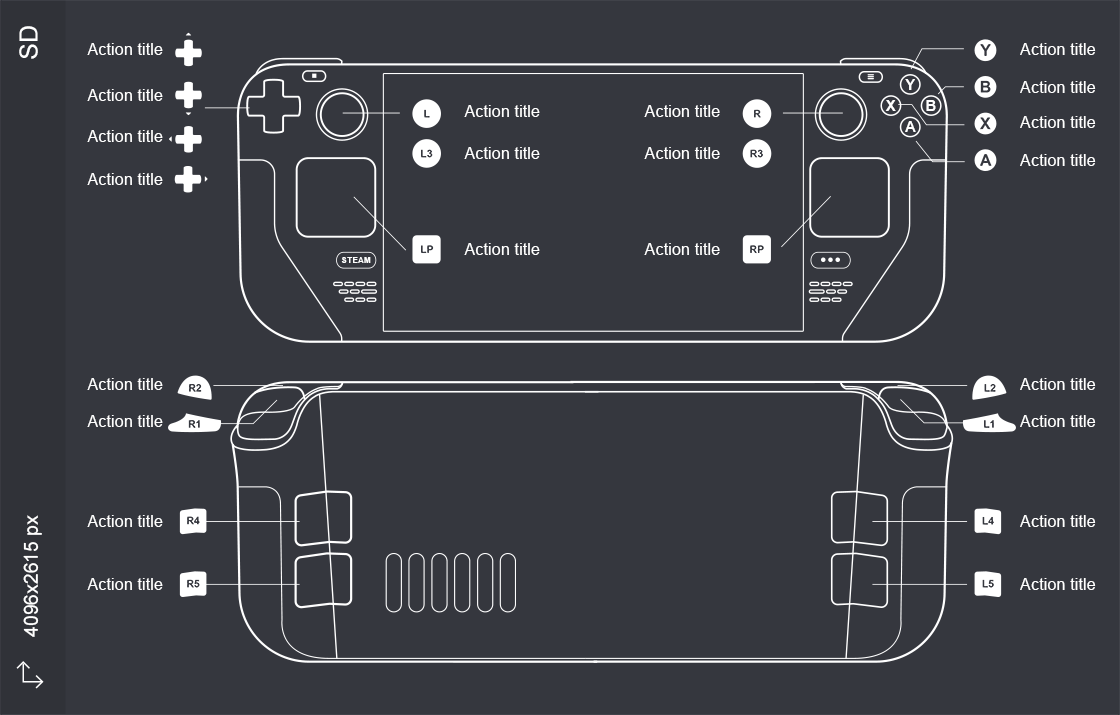
<style>
.page{position:relative;width:1120px;height:715px;background:#35373e}
.page>*{position:absolute;margin:0}
.t1{font:25px "ArialMT";color:#ffffff}
.t2{font:16.4px "ArialMT";color:#ffffff}
.t3{font:15.3px "Arial-BoldMT";color:#ffffff}
.t4{font:7.5px "Arial-BoldMT";letter-spacing:0.08em;color:#ffffff}
.t5{font:19.6px "ArialMT";color:#ffffff}
</style>
<div class="page">
<p class="t1" style="left:19px;top:26px;width:19px;height:33px;rotate:-90deg">SD</p>
<p class="t2" style="left:87px;top:43px;width:76px;height:12px">Action title</p>
<p class="t2" style="left:1020px;top:43px;width:76px;height:12px">Action title</p>
<p class="t2" style="left:87px;top:89px;width:76px;height:12px">Action title</p>
<p class="t3" style="left:905px;top:79px;width:10px;height:11px">Y</p>
<p class="t2" style="left:1020px;top:81px;width:76px;height:12px">Action title</p>
<p class="t3" style="left:885px;top:100px;width:11px;height:11px">X</p>
<p class="t3" style="left:926px;top:100px;width:10px;height:11px">B</p>
<p class="t2" style="left:464px;top:105px;width:76px;height:12px">Action title</p>
<p class="t2" style="left:644px;top:105px;width:76px;height:12px">Action title</p>
<p class="t3" style="left:905px;top:121px;width:11px;height:11px">A</p>
<p class="t2" style="left:1020px;top:116px;width:76px;height:12px">Action title</p>
<p class="t2" style="left:87px;top:130px;width:76px;height:12px">Action title</p>
<p class="t2" style="left:464px;top:147px;width:76px;height:12px">Action title</p>
<p class="t2" style="left:644px;top:147px;width:76px;height:12px">Action title</p>
<p class="t2" style="left:1020px;top:154px;width:76px;height:12px">Action title</p>
<p class="t2" style="left:87px;top:173px;width:76px;height:12px">Action title</p>
<p class="t2" style="left:464px;top:243px;width:76px;height:12px">Action title</p>
<p class="t2" style="left:644px;top:243px;width:76px;height:12px">Action title</p>
<p class="t4" style="left:341px;top:257px;width:30px;height:6px">STEAM</p>
<p class="t2" style="left:87px;top:378px;width:76px;height:12px">Action title</p>
<p class="t2" style="left:1020px;top:378px;width:76px;height:12px">Action title</p>
<p class="t2" style="left:87px;top:415px;width:76px;height:12px">Action title</p>
<p class="t2" style="left:1020px;top:415px;width:76px;height:12px">Action title</p>
<p class="t5" style="left:23px;top:515px;width:19px;height:122px;rotate:-90deg">4096x2615 px</p>
<p class="t2" style="left:87px;top:515px;width:76px;height:12px">Action title</p>
<p class="t2" style="left:1020px;top:515px;width:76px;height:12px">Action title</p>
<p class="t2" style="left:87px;top:578px;width:76px;height:12px">Action title</p>
<p class="t2" style="left:1020px;top:578px;width:76px;height:12px">Action title</p>
</div>
